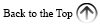
<style>
.page{position:relative;width:100px;height:25px;background:#ffffff}
.page>*{position:absolute;margin:0}
.t1{font:11px "TimesNewRomanPSMT";color:#000000}
</style>
<div class="page">
<p class="t1" style="left:3px;top:9px;width:70px;height:10px">Back to the Top</p>
</div>
